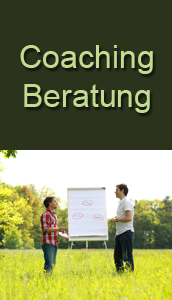
<style>
.page{position:relative;width:172px;height:300px;background:#2c331d}
.page>*{position:absolute;margin:0}
.t1{font:32.1px "ArialMT";color:#c2db91}
</style>
<div class="page">
<p class="t1" style="left:20px;top:45px;width:133px;height:68px;text-align:center">Coaching<br>Beratung</p>
</div>
